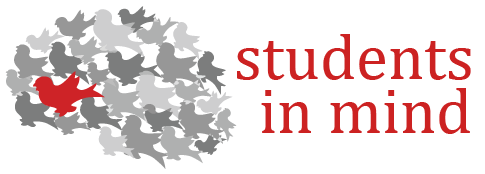
<style>
.page{position:relative;width:485px;height:174px;background:#ffffff}
.page>*{position:absolute;margin:0}
.t1{font:65px "Cambria";color:#cc2222}
</style>
<div class="page">
<p class="t1" style="left:237px;top:34px;width:234px;height:46px">students</p>
<p class="t1" style="left:261px;top:88px;width:209px;height:46px">in mind</p>
</div>
